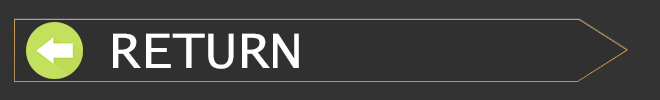
<style>
.page{position:relative;width:660px;height:100px;background:#303030}
.page>*{position:absolute;margin:0}
.t1{font:54.6px "LucidaConsole";letter-spacing:-0.025em;color:#ffffff;text-transform:uppercase}
</style>
<div class="page">
<p class="t1" style="left:113px;top:33px;width:186px;height:36px">Return</p>
</div>
